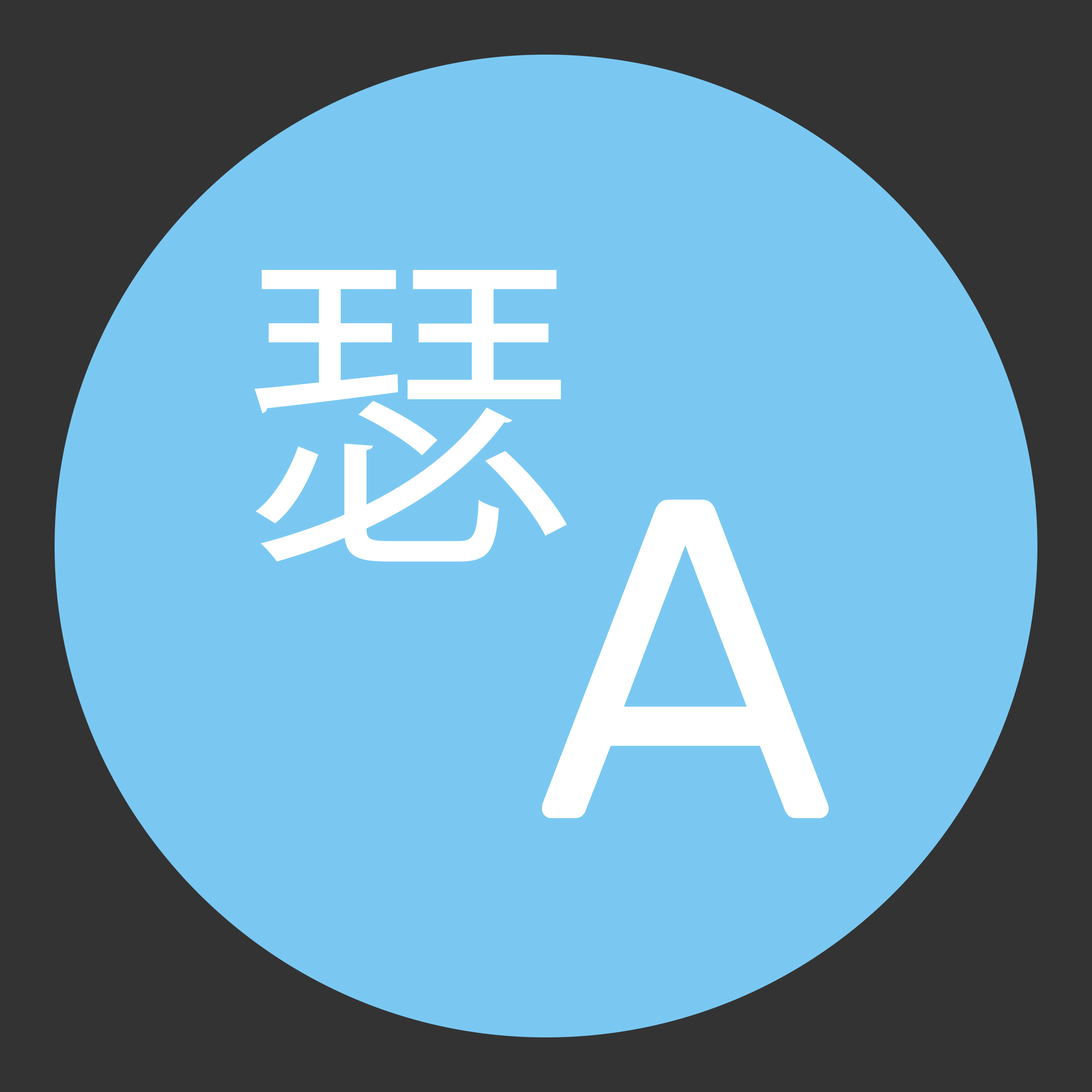
<style>
.page{position:relative;width:1092px;height:1092px;background:#7ac8f2}
.page>*{position:absolute;margin:0}
.t1{font:334.7px "KozGoPr6N-Regular";letter-spacing:0.1em;color:#ffffff}
.t2{font:455px "Rubik-Regular";letter-spacing:0.1em;color:#ffffff}
</style>
<div class="page">
<p class="t1" style="left:255px;top:270px;width:312px;height:292px">瑟</p>
<p class="t2" style="left:542px;top:499px;width:287px;height:319px">A</p>
</div>
